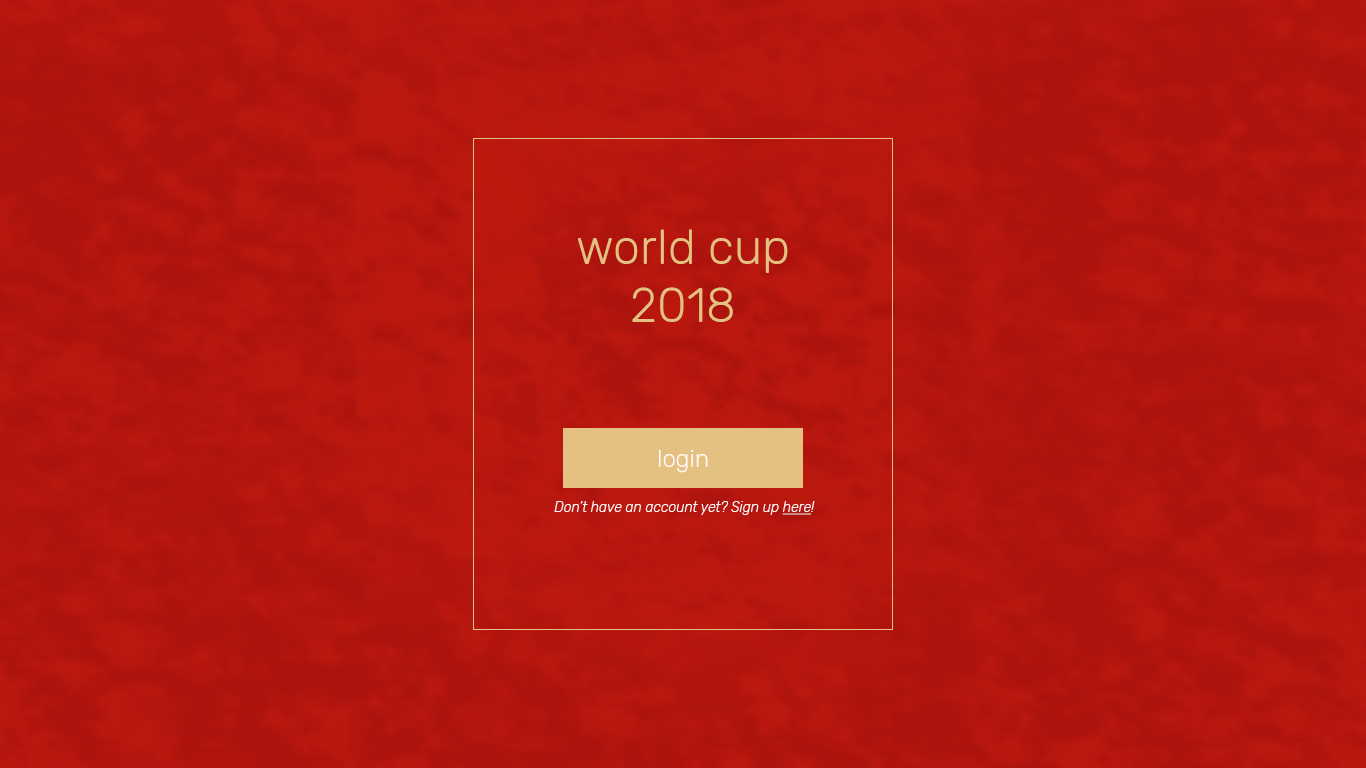
<style>
.page{position:relative;width:1366px;height:768px}
.page>*{position:absolute;margin:0}
.t1{font:48px "Rubik-Light";color:#e4c181}
.t2{font:24px "Rubik-Light";color:#fff9f7}
.t3{font:14px "Rubik-LightItalic";color:#fff9f7}
.t4{font:14px "Rubik-LightItalic";color:#fff9f7;text-decoration:underline}
</style>
<div class="page">
<p class="t1" style="left:578px;top:229px;width:210px;height:93px;text-align:center">world cup 2018</p>
<p class="t2" style="left:658px;top:450px;width:50px;height:23px">login</p>
<p class="t3" style="left:554px;top:501px;width:261px;height:14px">Don’t have an account yet? Sign up <span class="t4">here</span>!</p>
</div>
